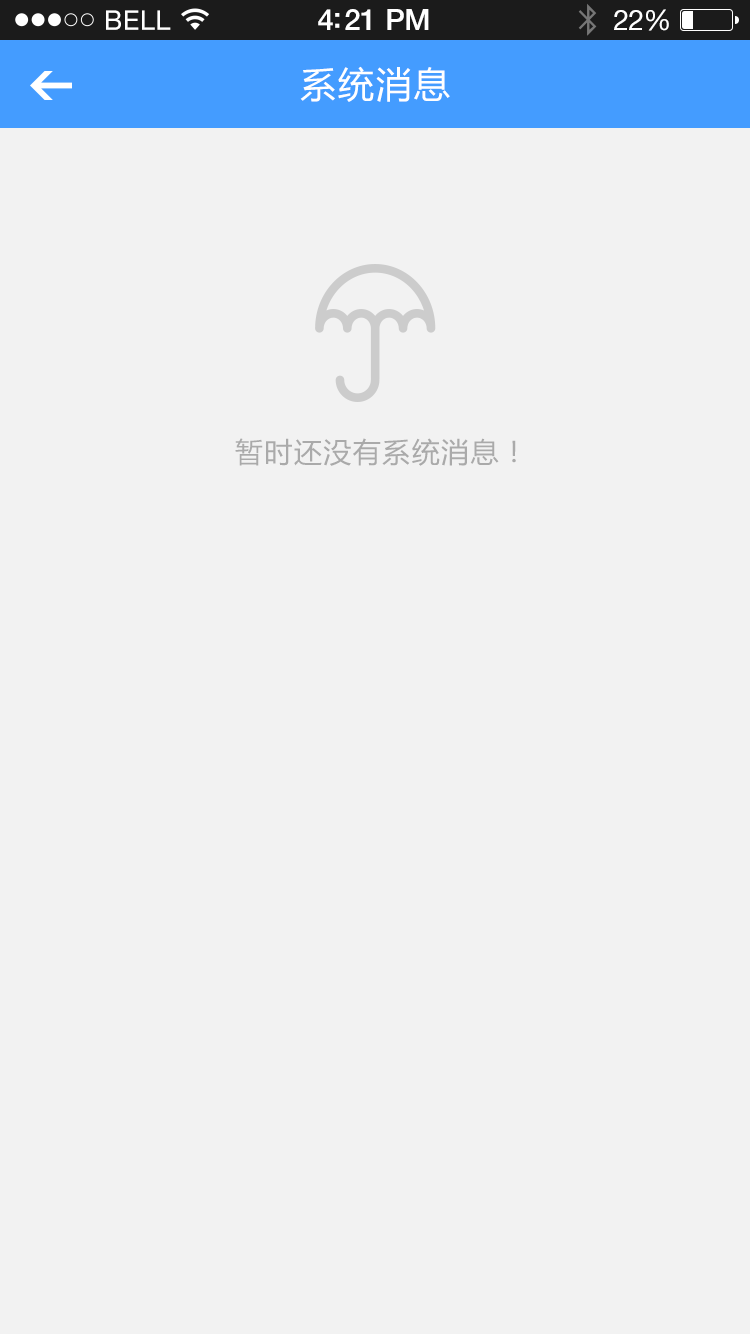
<style>
.page{position:relative;width:750px;height:1334px;background:#f2f2f2}
.page>*{position:absolute;margin:0}
.t1{font:36px "MicrosoftYaHei";letter-spacing:0.05em;color:#ffffff}
.t2{font:28px "MicrosoftYaHei";letter-spacing:0.05em;color:#aaaaaa}
</style>
<div class="page">
<p class="t1" style="left:300px;top:66px;width:150px;height:36px">系统消息</p>
<p class="t2" style="left:235px;top:438px;width:281px;height:28px">暂时还没有系统消息！</p>
</div>
